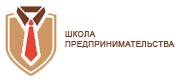
<style>
.page{position:relative;width:180px;height:80px;background:#ffffff}
.page>*{position:absolute;margin:0}
.t1{font:8.2px "ArialMT";letter-spacing:0.025em;color:#773a24}
</style>
<div class="page">
<p class="t1" style="left:65px;top:31px;width:110px;height:17px">ШКОЛА <br>ПРЕДПРИНИМАТЕЛЬСТВА</p>
</div>
